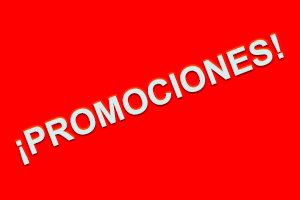
<style>
.page{position:relative;width:300px;height:200px;background:#ff0000}
.page>*{position:absolute;margin:0}
.t1{font:34.7px "Arial-BoldMT";color:#d8ecec;text-transform:uppercase}
</style>
<div class="page">
<p class="t1" style="left:15px;top:34px;width:269px;height:131px;rotate:-21deg">¡Promociones!</p>
</div>
